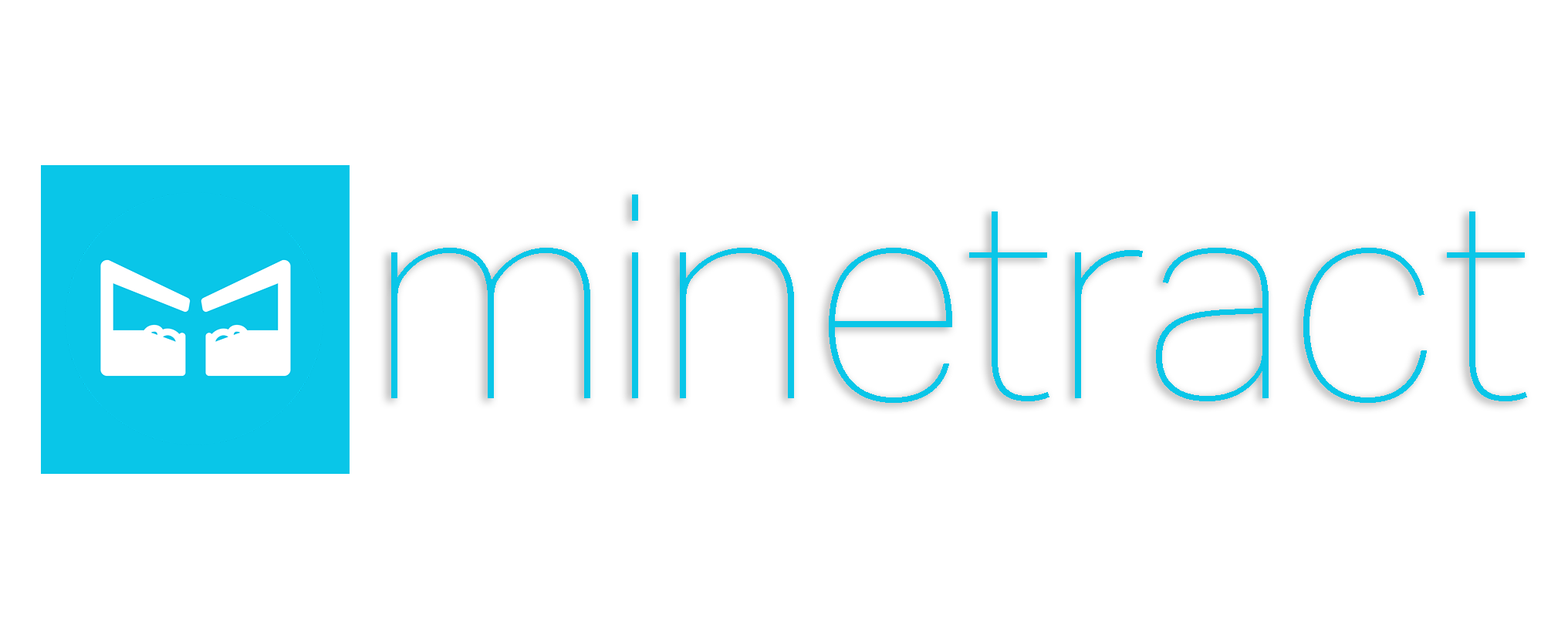
<style>
.page{position:relative;width:1568px;height:639px;background:#ffffff}
.page>*{position:absolute;margin:0}
.t1{font:285.5px "AktivGrotesk-Hairline";color:#09c6e8}
</style>
<div class="page">
<p class="t1" style="left:391px;top:194px;width:1136px;height:209px">minetract</p>
</div>
